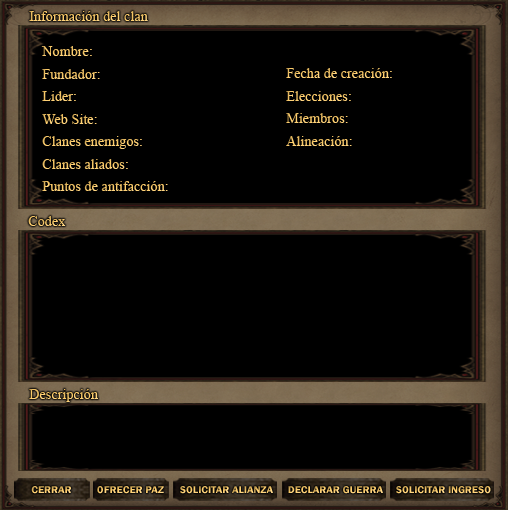
<style>
.page{position:relative;width:508px;height:510px;background:#000000}
.page>*{position:absolute;margin:0}
.t1{font:14px "TimesNewRomanPSMT"}
.t2{font:14px/22.5px "TimesNewRomanPSMT"}
.t3{font:14px "TimesNewRomanPSMT";color:#fccc6a}
.t4{font:10px "FranklinGothic-Demi";scale:1.07 1}
.t5{font:10px "FranklinGothic-Demi";color:#ffd070;scale:1.07 1}
</style>
<div class="page">
<p class="t1" style="left:29px;top:11px;width:119px;height:10px">Información del clan</p>
<p class="t2" style="left:41px;top:46px;width:127px;height:145px">Nombre:<br>Fundador:<br>Lider:<br>Web Site:<br>Clanes enemigos:<br>Clanes aliados:<br>Puntos de antifacción:</p>
<p class="t2" style="left:286px;top:68px;width:106px;height:78px">Fecha de creación:<br>Elecciones:<br>Miembros:<br>Alineación:</p>
<p class="t1" style="left:28px;top:216px;width:38px;height:10px">Codex</p>
<p class="t3" style="left:29px;top:389px;width:69px;height:13px">Descripción</p>
<p class="t4" style="left:31px;top:486px;width:40px;height:8px">CERRAR</p>
<p class="t4" style="left:97px;top:486px;width:67px;height:8px">OFRECER PAZ</p>
<p class="t5" style="left:180px;top:486px;width:93px;height:8px">SOLICITAR ALIANZA</p>
<p class="t4" style="left:288px;top:486px;width:95px;height:8px">DECLARAR GUERRA</p>
<p class="t4" style="left:396px;top:486px;width:95px;height:8px">SOLICITAR INGRESO</p>
</div>
